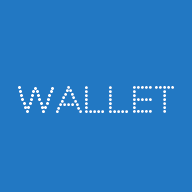
<style>
.page{position:relative;width:192px;height:192px;background:#2278c3}
.page>*{position:absolute;margin:0}
.t1{font:36px "Perfograma";color:#ffffff}
</style>
<div class="page">
<p class="t1" style="left:18px;top:86px;width:156px;height:27px">Wallet</p>
</div>
